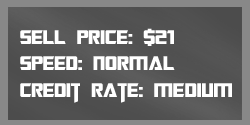
<style>
.page{position:relative;width:250px;height:125px}
.page>*{position:absolute;margin:0}
.t1{font:22px "TransformersMovie";color:#ffffff}
.t2{font:22px "TransformersMovie";letter-spacing:0.02em;color:#ffffff}
</style>
<div class="page">
<p class="t1" style="left:20px;top:28px;width:212px;height:75px">sell p<span class="t2">ri</span>ce: $21<br>spee<span class="t2">d</span>: <span class="t2">normal<br></span>credit rate: <span class="t2">medium</span></p>
</div>
